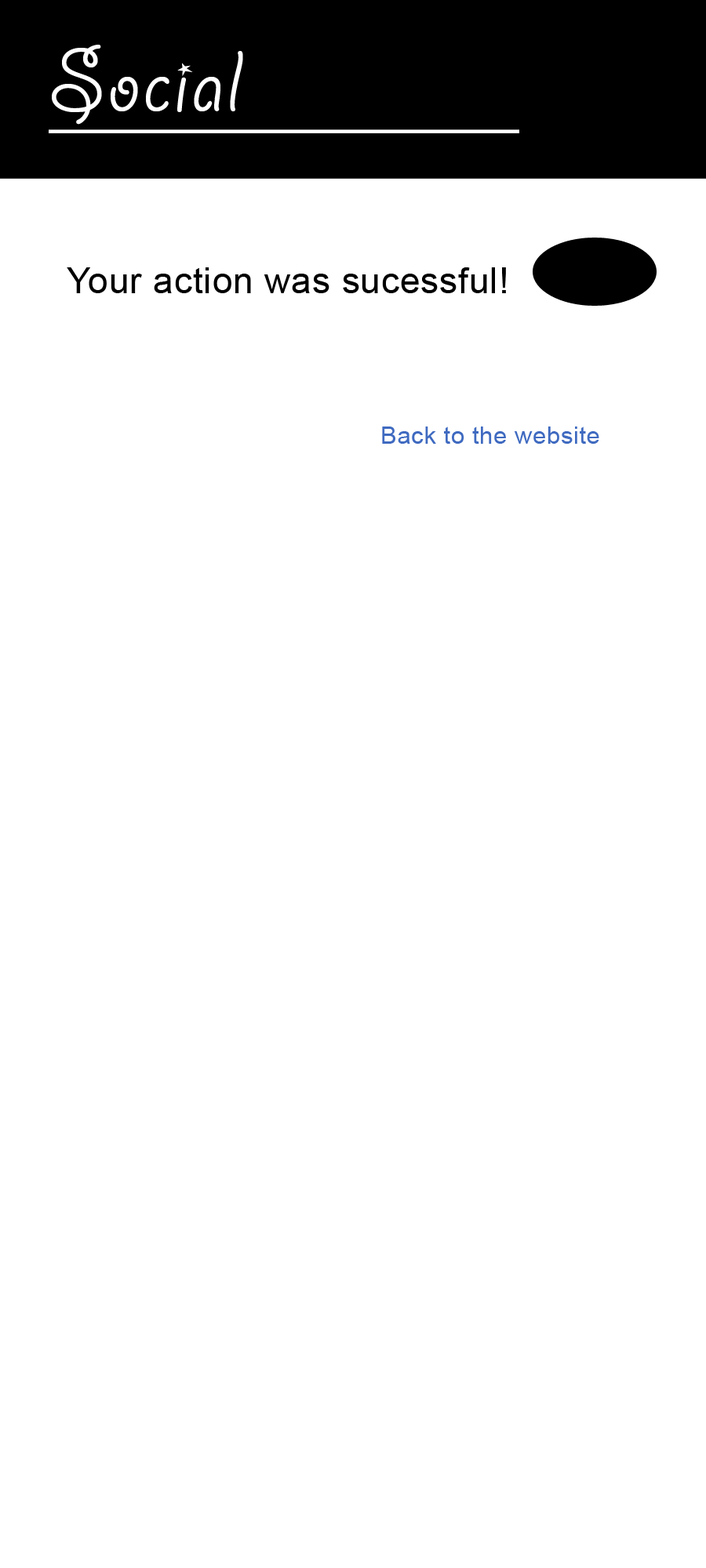
<style>
.page{position:relative;width:706px;height:1568px;background:#ffffff}
.page>*{position:absolute;margin:0}
.t1{font:97.2px "GiddyupStd";letter-spacing:0.02em;color:#ffffff}
.t2{font:36.1px "ArialMT";letter-spacing:0.02em;color:#000000}
.t3{font:24.3px "ArialMT";letter-spacing:0.02em;color:#3f6ac0}
</style>
<div class="page">
<p class="t1" style="left:52px;top:45px;width:191px;height:80px">Social</p>
<p class="t2" style="left:67px;top:267px;width:439px;height:26px">Your action was sucessful!</p>
<p class="t3" style="left:382px;top:426px;width:217px;height:18px">Back to the website</p>
</div>
